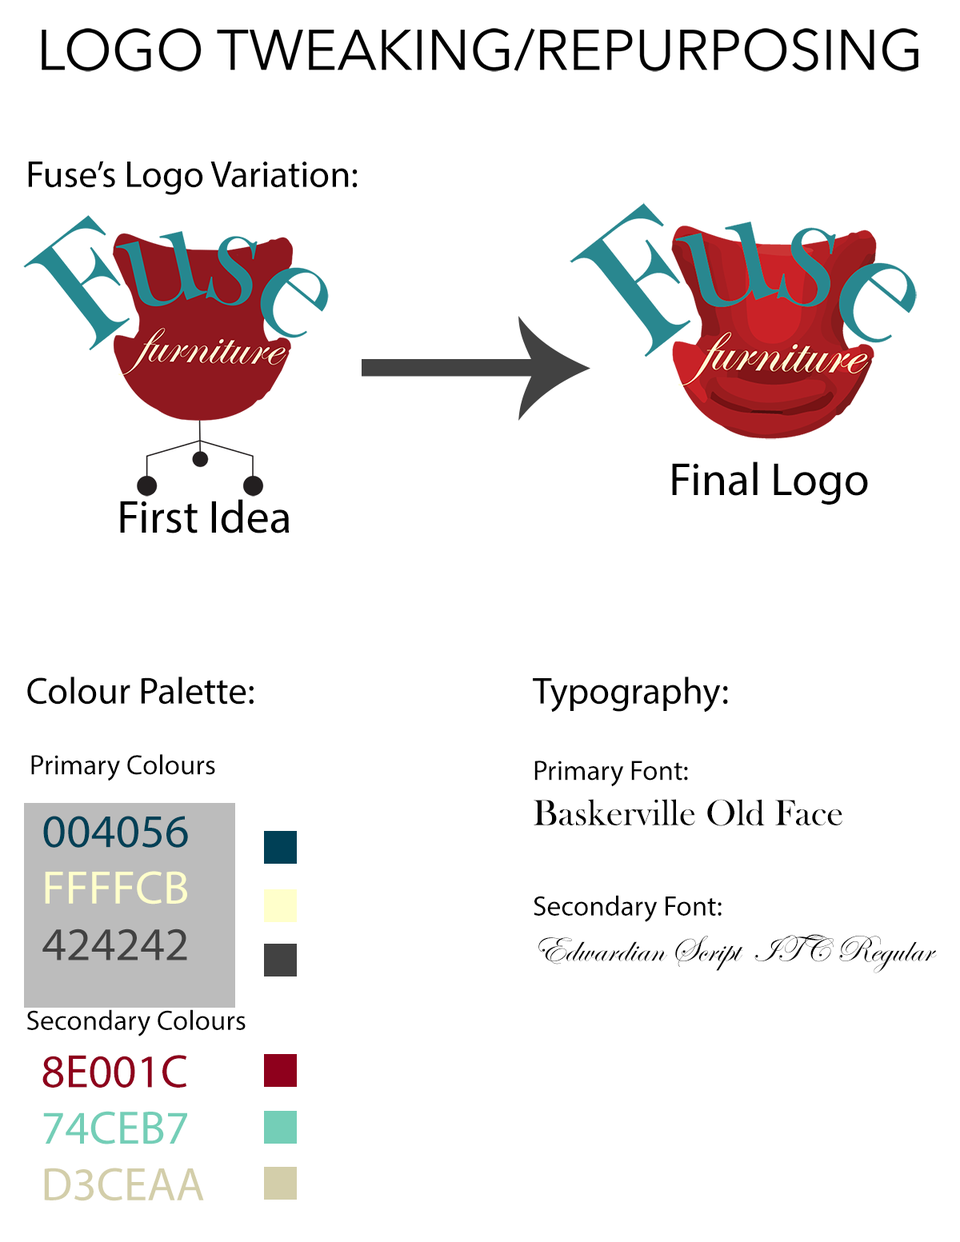
<style>
.page{position:relative;width:960px;height:1242px;background:#ffffff}
.page>*{position:absolute;margin:0}
.t1{font:56.5px "AvenirNext-Regular";color:#000000}
.t2{font:37.6px "MyriadPro-Regular";color:#000000}
.t3{font:46.7px "MyriadPro-Regular";color:#000000}
.t4{font:28.2px "MyriadPro-Regular";color:#000000}
.t5{font:37.6px "EdwardianScriptITC";color:#000000}
.t6{font:37.6px "BaskOldFace";color:#000000}
.t7{font:47.1px "MyriadPro-Regular";color:#004056}
.t8{font:47.1px "MyriadPro-Regular";color:#ffffcb}
.t9{font:47.1px "MyriadPro-Regular";color:#424242}
.t10{font:47.1px "MyriadPro-Regular";color:#8e001c}
.t11{font:47.1px "MyriadPro-Regular";color:#74ceb7}
.t12{font:47.1px "MyriadPro-Regular";color:#d3ceaa}
</style>
<div class="page">
<p class="t1" style="left:42px;top:28px;width:876px;height:44px">LOGO TWEAKING/REPURPOSING</p>
<p class="t2" style="left:28px;top:161px;width:330px;height:34px">Fuse’s Logo Variation:</p>
<p class="t3" style="left:672px;top:462px;width:196px;height:43px">Final Logo</p>
<p class="t3" style="left:120px;top:499px;width:170px;height:35px">First Idea</p>
<p class="t2" style="left:27px;top:677px;width:227px;height:28px">Colour Palette:</p>
<p class="t2" style="left:533px;top:677px;width:195px;height:36px">Typography:</p>
<p class="t4" style="left:31px;top:754px;width:184px;height:28px">Primary Colours</p>
<p class="t5" style="left:534px;top:761px;width:403px;height:212px"><span class="t4">Primary Font:<br></span><span class="t6">Baskerville Old Face                                      </span><span class="t4">Secondary Font:              </span>Edwardian Script  ITC Regular</p>
<p class="t7" style="left:42px;top:816px;width:146px;height:145px">004056           <span class="t8">FFFFCB         </span><span class="t9">424242</span></p>
<p class="t4" style="left:27px;top:1009px;width:219px;height:28px">Secondary Colours</p>
<p class="t10" style="left:42px;top:1055px;width:162px;height:146px">8E001C        <span class="t11">74CEB7        </span><span class="t12">D3CEAA</span></p>
</div>
